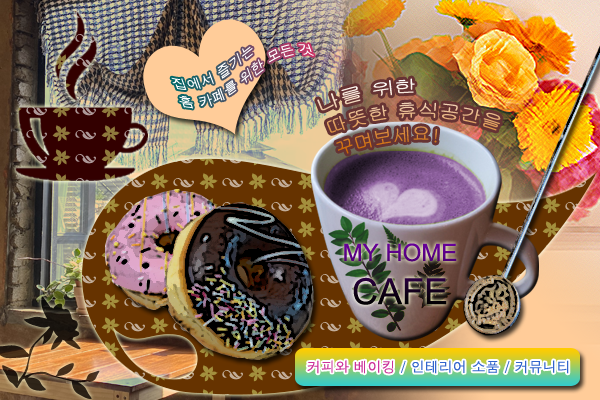
<style>
.page{position:relative;width:600px;height:400px}
.page>*{position:absolute;margin:0}
.t1{font:14px/19.2px "Dotum";color:#ffffff}
.t2{font:18px/24px "Gulim"}
.t3{font:24px "ArialMT"}
.t4{font:36px "ArialMT"}
.t5{font:14px "Dotum";color:#3366cc}
.t6{font:14px "Dotum";color:#cc3399}
</style>
<div class="page">
<p class="t1" style="left:171px;top:44px;width:143px;height:65px;rotate:-20deg">집에서 즐기는<br>홈 카페를 위한 모든 것</p>
<p class="t2" style="left:317px;top:78px;width:184px;height:76px">나를 위한 <br>따뜻한 휴식공간을 <br>꾸며보세요!</p>
<p class="t3" style="left:344px;top:243px;width:113px;height:62px;text-align:center">MY HOME<br><span class="t4">CAFE</span></p>
<p class="t5" style="left:307px;top:360px;width:262px;height:14px"><span class="t6">커피와 베이킹</span> / 인테리어 소품 / 커뮤니티</p>
</div>
